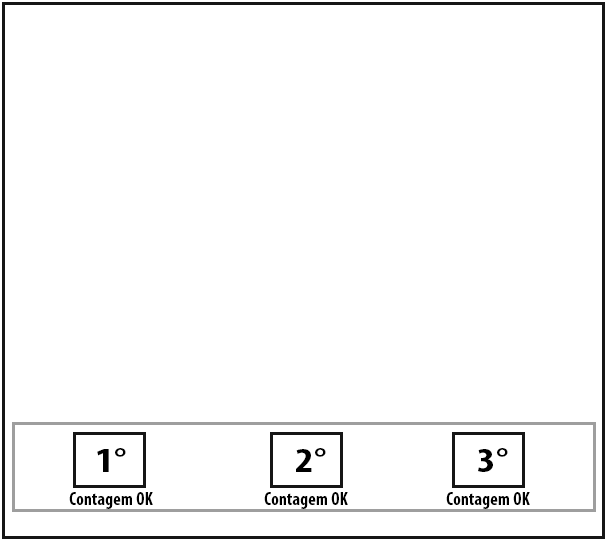
<style>
.page{position:relative;width:608px;height:542px;background:#ffffff}
.page>*{position:absolute;margin:0}
.t1{font:35px "MyriadPro-BoldCond";color:#000000;scale:1.24 1}
.t2{font:18px "MyriadPro-BoldCond";color:#000000}
</style>
<div class="page">
<p class="t1" style="left:97px;top:448px;width:29px;height:24px">1°</p>
<p class="t1" style="left:296px;top:448px;width:30px;height:24px">2°</p>
<p class="t1" style="left:478px;top:448px;width:30px;height:24px">3°</p>
<p class="t2" style="left:69px;top:492px;width:84px;height:17px">Contagem OK</p>
<p class="t2" style="left:264px;top:492px;width:84px;height:17px">Contagem OK</p>
<p class="t2" style="left:446px;top:492px;width:84px;height:17px">Contagem OK</p>
</div>
